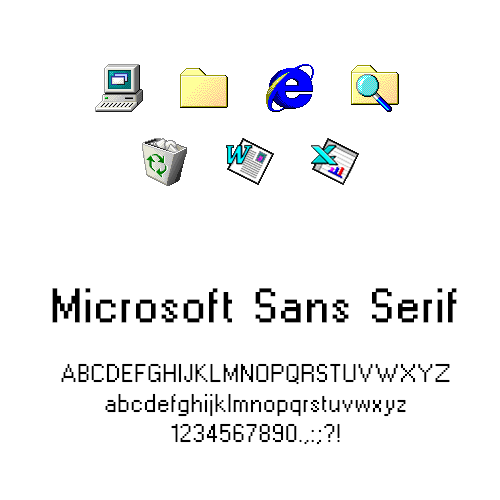
<style>
.page{position:relative;width:500px;height:500px;background:#ffffff}
.page>*{position:absolute;margin:0}
.t1{font:16px/30px "MyFont";letter-spacing:0.075em;color:#000000}
.t2{font:30px/30px "MyFont";letter-spacing:0.075em;color:#000000;font-weight:bold}
</style>
<div class="page">
<p class="t1" style="left:52px;top:288px;width:405px;height:157px;text-align:center"><span class="t2">Microsoft Sans Serif<br><br></span>ABCDEFGHIJKLMNOPQRSTUVWXYZ<br>abcdefghijklmnopqrstuvwxyz<br>1234567890.,:;?!</p>
</div>
